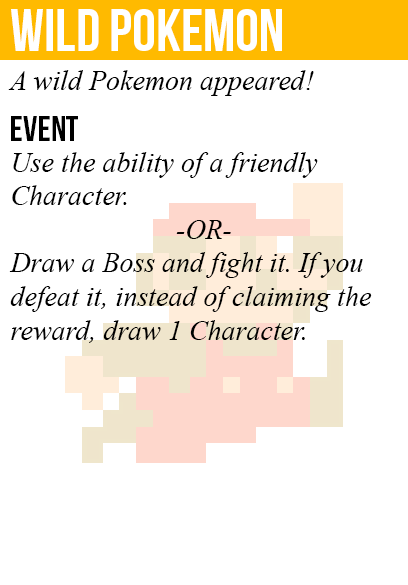
<style>
.page{position:relative;width:408px;height:585px;background:#ffffff}
.page>*{position:absolute;margin:0}
.t1{font:60px "BebasNeue";color:#ffffff}
.t2{font:28px "TimesNewRomanPS-ItalicMT";color:#000000}
.t3{font:36px "BebasNeue";color:#000000}
</style>
<div class="page">
<p class="t1" style="left:11px;top:9px;width:271px;height:42px">wild pokemon</p>
<p class="t2" style="left:8px;top:70px;width:306px;height:26px">A wild Pokemon appeared!</p>
<p class="t3" style="left:11px;top:116px;width:67px;height:25px">event</p>
<p class="t2" style="left:9px;top:152px;width:363px;height:191px">Use the ability of a friendly<br>Character.<br><br>Draw a Boss and fight it. If you<br>defeat it, instead of claiming the<br>reward, draw 1 Character.</p>
<p class="t2" style="left:176px;top:220px;width:55px;height:19px">-OR-</p>
</div>
